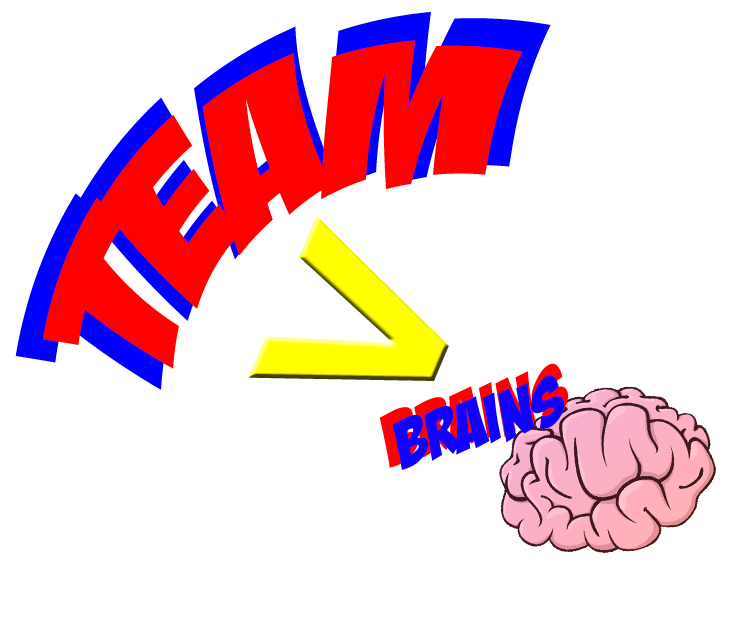
<style>
.page{position:relative;width:750px;height:634px;background:#ffffff}
.page>*{position:absolute;margin:0}
.t1{font:224.4px "BadaBoomBB";scale:0.94 1}
.t2{font:196.7px "BadaBoomBB";color:#ff0000;scale:0.96 1}
.t3{font:323.1px "ArialRoundedMTBold";color:#ffff00;scale:1.08 1}
.t4{font:73.8px "BadaBoomBB";scale:1.11 1}
.t5{font:66.9px "BadaBoomBB";color:#1000ff;scale:1.11 1}
</style>
<div class="page">
<p class="t1" style="left:15px;top:12px;width:536px;height:378px;rotate:-32deg">Team</p>
<p class="t2" style="left:43px;top:40px;width:480px;height:329px;rotate:-31deg">Team</p>
<p class="t3" style="left:248px;top:216px;width:201px;height:165px;rotate:23deg">&lt;</p>
<p class="t4" style="left:379px;top:363px;width:189px;height:105px;rotate:-16deg">Brains</p>
<p class="t5" style="left:392px;top:375px;width:173px;height:95px;rotate:-16deg">Brains</p>
</div>
